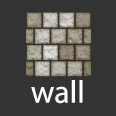
<style>
.page{position:relative;width:116px;height:116px;background:#333333}
.page>*{position:absolute;margin:0}
.t1{font:32px "MyriadPro-Regular";color:#ffffff}
</style>
<div class="page">
<p class="t1" style="left:31px;top:80px;width:52px;height:24px">wall</p>
</div>
